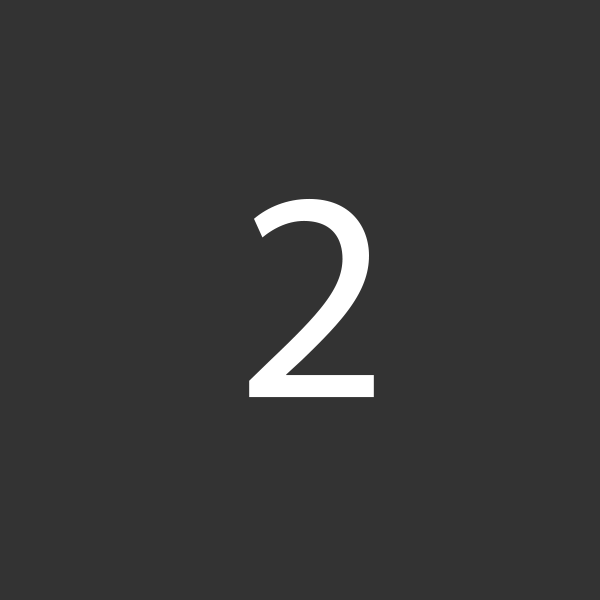
<style>
.page{position:relative;width:600px;height:600px;background:#333333}
.page>*{position:absolute;margin:0}
.t1{font:300px "MyriadPro-Regular";color:#ffffff}
</style>
<div class="page">
<p class="t1" style="left:249px;top:198px;width:125px;height:200px">2</p>
</div>
